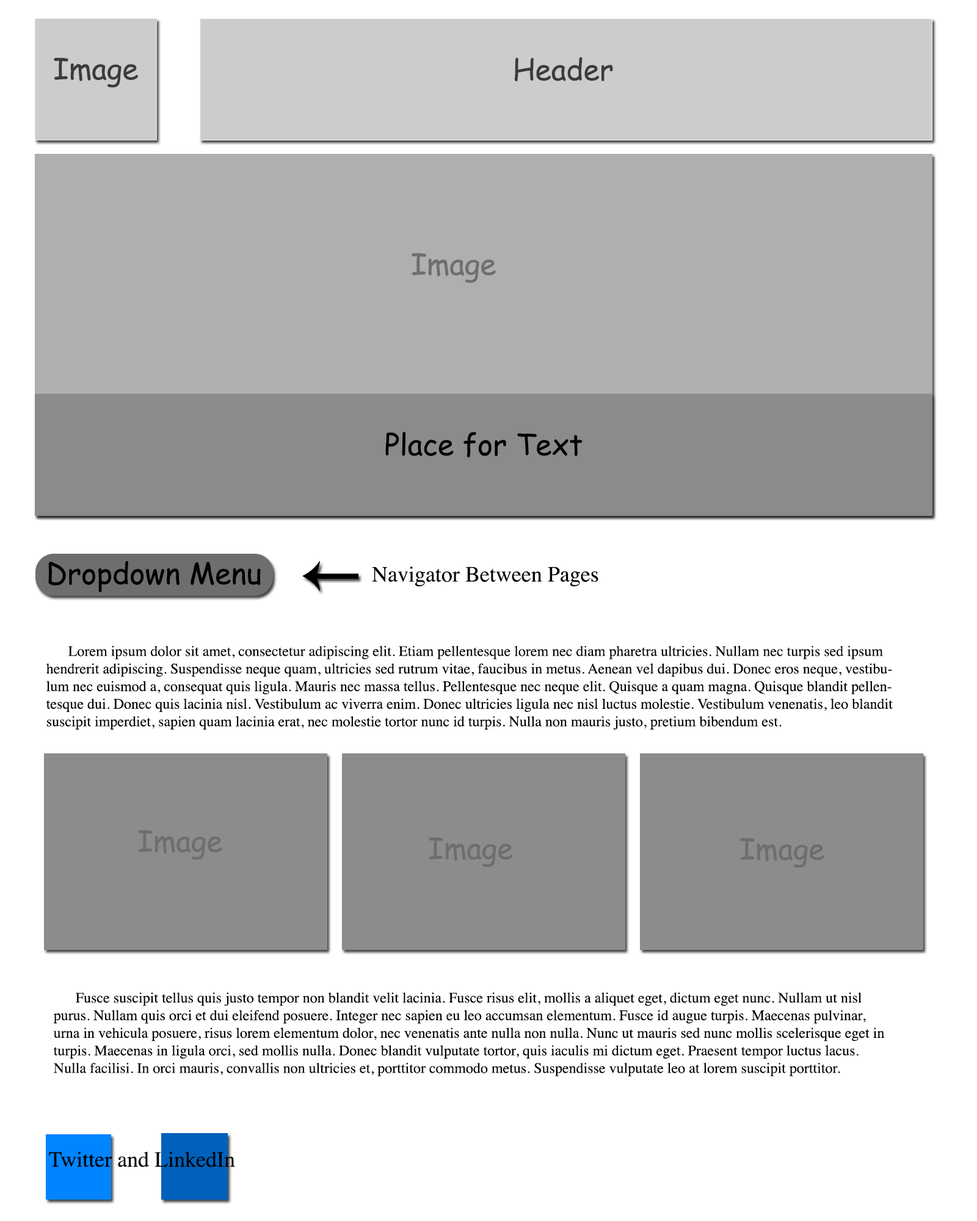
<style>
.page{position:relative;width:977px;height:1221px;background:#ffffff}
.page>*{position:absolute;margin:0}
.t1{font:29.3px "ComicSansMS";color:#3b3b3b}
.t2{font:29.3px "ComicSansMS";color:#6e6e6e}
.t3{font:29.3px "ComicSansMS";color:#000000}
.t4{font:22px "Times-Roman";color:#000000}
.t5{font:14.7px "Times-Roman";color:#000000}
</style>
<div class="page">
<p class="t1" style="left:54px;top:57px;width:84px;height:31px">Image</p>
<p class="t1" style="left:515px;top:57px;width:98px;height:25px">Header</p>
<p class="t2" style="left:411px;top:253px;width:85px;height:30px">Image</p>
<p class="t3" style="left:385px;top:432px;width:197px;height:26px">Place for Text</p>
<p class="t3" style="left:48px;top:561px;width:213px;height:32px">Dropdown Menu</p>
<p class="t4" style="left:372px;top:566px;width:226px;height:21px">Navigator Between Pages</p>
<p class="t5" style="left:46px;top:645px;width:846px;height:84px">Lorem ipsum dolor sit amet, consectetur adipiscing elit. Etiam pellentesque lorem nec diam pharetra ultricies. Nullam nec turpis sed ipsum hendrerit adipiscing. Suspendisse neque quam, ultricies sed rutrum vitae, faucibus in metus. Aenean vel dapibus dui. Donec eros neque, vestibulum nec euismod a, consequat quis ligula. Mauris nec massa tellus. Pellentesque nec neque elit. Quisque a quam magna. Quisque blandit pellentesque dui. Donec quis lacinia nisl. Vestibulum ac viverra enim. Donec ultricies ligula nec nisl luctus molestie. Vestibulum venenatis, leo blandit suscipit imperdiet, sapien quam lacinia erat, nec molestie tortor nunc id turpis. Nulla non mauris justo, pretium bibendum est.</p>
<p class="t2" style="left:138px;top:830px;width:84px;height:30px">Image</p>
<p class="t2" style="left:429px;top:837px;width:84px;height:30px">Image</p>
<p class="t2" style="left:740px;top:838px;width:84px;height:30px">Image</p>
<p class="t5" style="left:53px;top:992px;width:832px;height:84px">Fusce suscipit tellus quis justo tempor non blandit velit lacinia. Fusce risus elit, mollis a aliquet eget, dictum eget nunc. Nullam ut nisl purus. Nullam quis orci et dui eleifend posuere. Integer nec sapien eu leo accumsan elementum. Fusce id augue turpis. Maecenas pulvinar, urna in vehicula posuere, risus lorem elementum dolor, nec venenatis ante nulla non nulla. Nunc ut mauris sed nunc mollis scelerisque eget in turpis. Maecenas in ligula orci, sed mollis nulla. Donec blandit vulputate tortor, quis iaculis mi dictum eget. Praesent tempor luctus lacus. Nulla facilisi. In orci mauris, convallis non ultricies et, porttitor commodo metus. Suspendisse vulputate leo at lorem suscipit porttitor.</p>
<p class="t4" style="left:49px;top:1151px;width:186px;height:16px">Twitter and LinkedIn</p>
</div>
